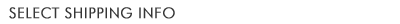
<style>
.page{position:relative;width:400px;height:24px;background:#ffffff}
.page>*{position:absolute;margin:0}
.t1{font:14.7px "FuturaBT-Light";letter-spacing:0.025em;color:#363636;text-transform:uppercase;font-weight:bold}
</style>
<div class="page">
<p class="t1" style="left:9px;top:7px;width:166px;height:12px">select shipping info</p>
</div>
